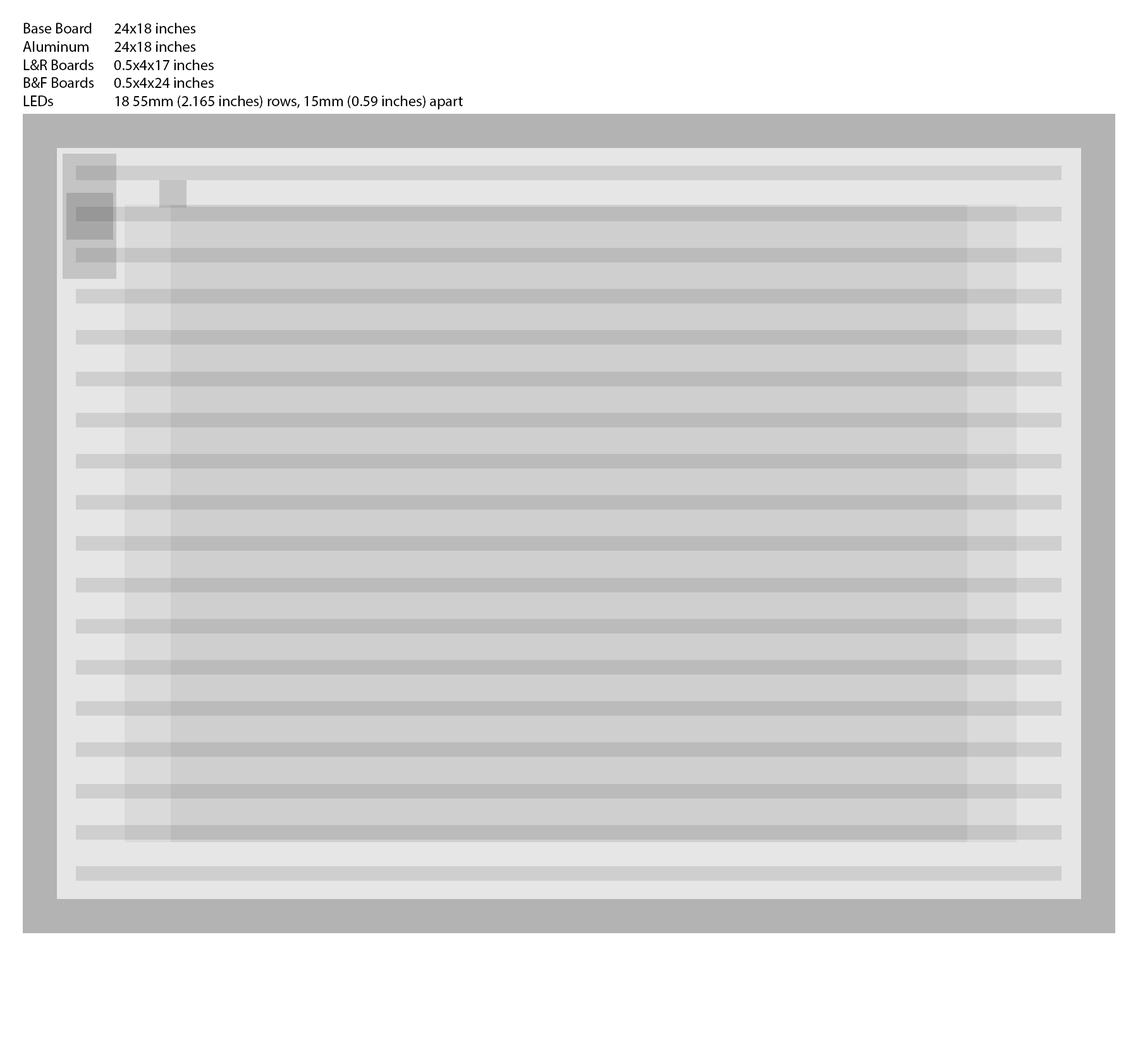
<style>
.page{position:relative;width:1138px;height:1047px;background:#cfcfcf}
.page>*{position:absolute;margin:0}
.t1{font:15.2px "MyriadPro-Regular";color:#000000}
</style>
<div class="page">
<p class="t1" style="left:23px;top:23px;width:440px;height:86px">Base Board 24x18 inches<br>Aluminum  24x18 inches<br>L&amp;R Boards 0.5x4x17 inches<br>B&amp;F Boards 0.5x4x24 inches<br>LEDs   18 55mm (2.165 inches) rows, 15mm (0.59 inches) apart</p>
</div>
